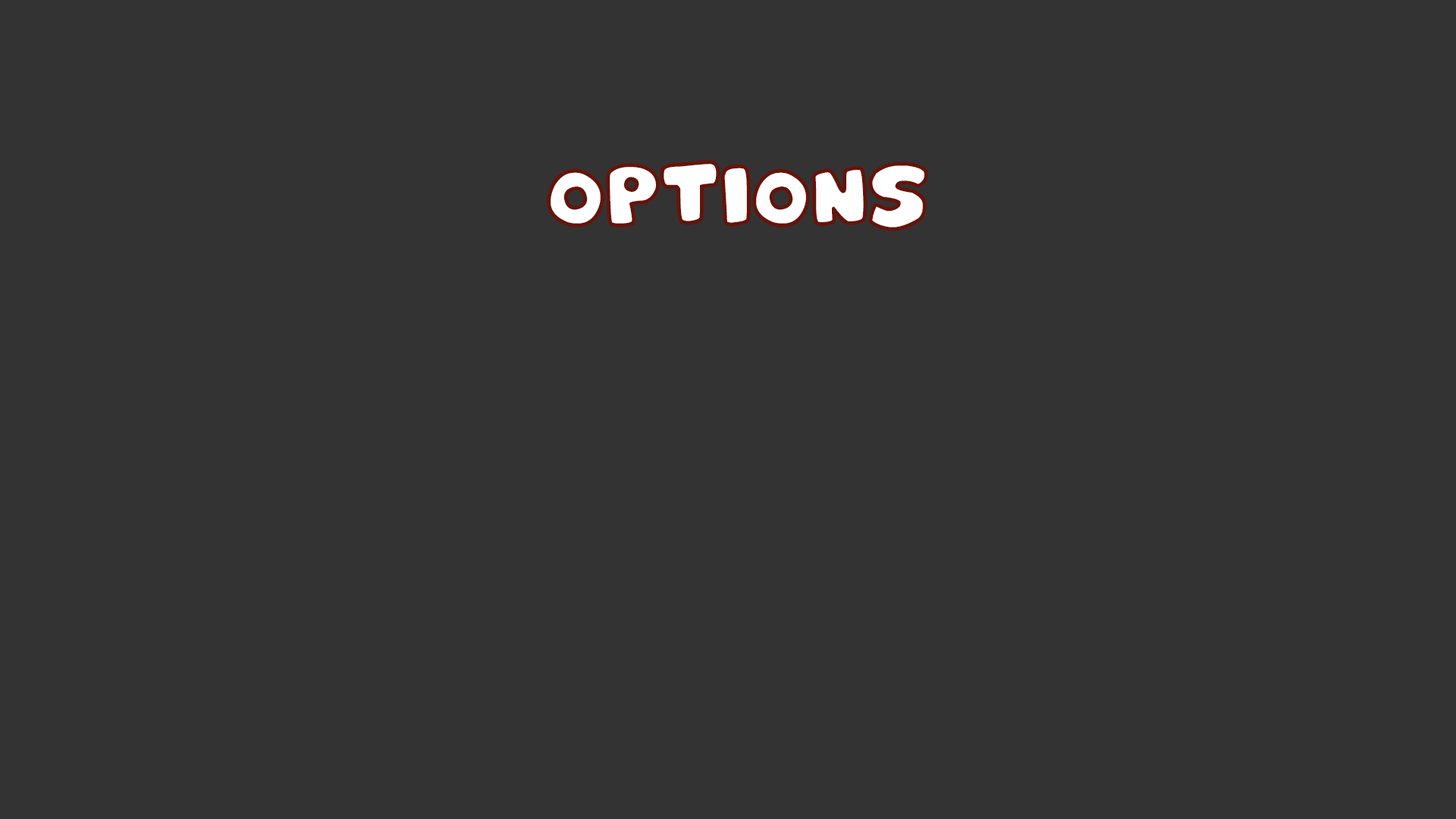
<style>
.page{position:relative;width:1456px;height:819px;background:#333333}
.page>*{position:absolute;margin:0}
.t1{font:36.4px "PatchworkStitchlingsColor";letter-spacing:-0.025em;color:#ffffff}
</style>
<div class="page">
<p class="t1" style="left:551px;top:164px;width:373px;height:63px;text-align:center">Options</p>
</div>
